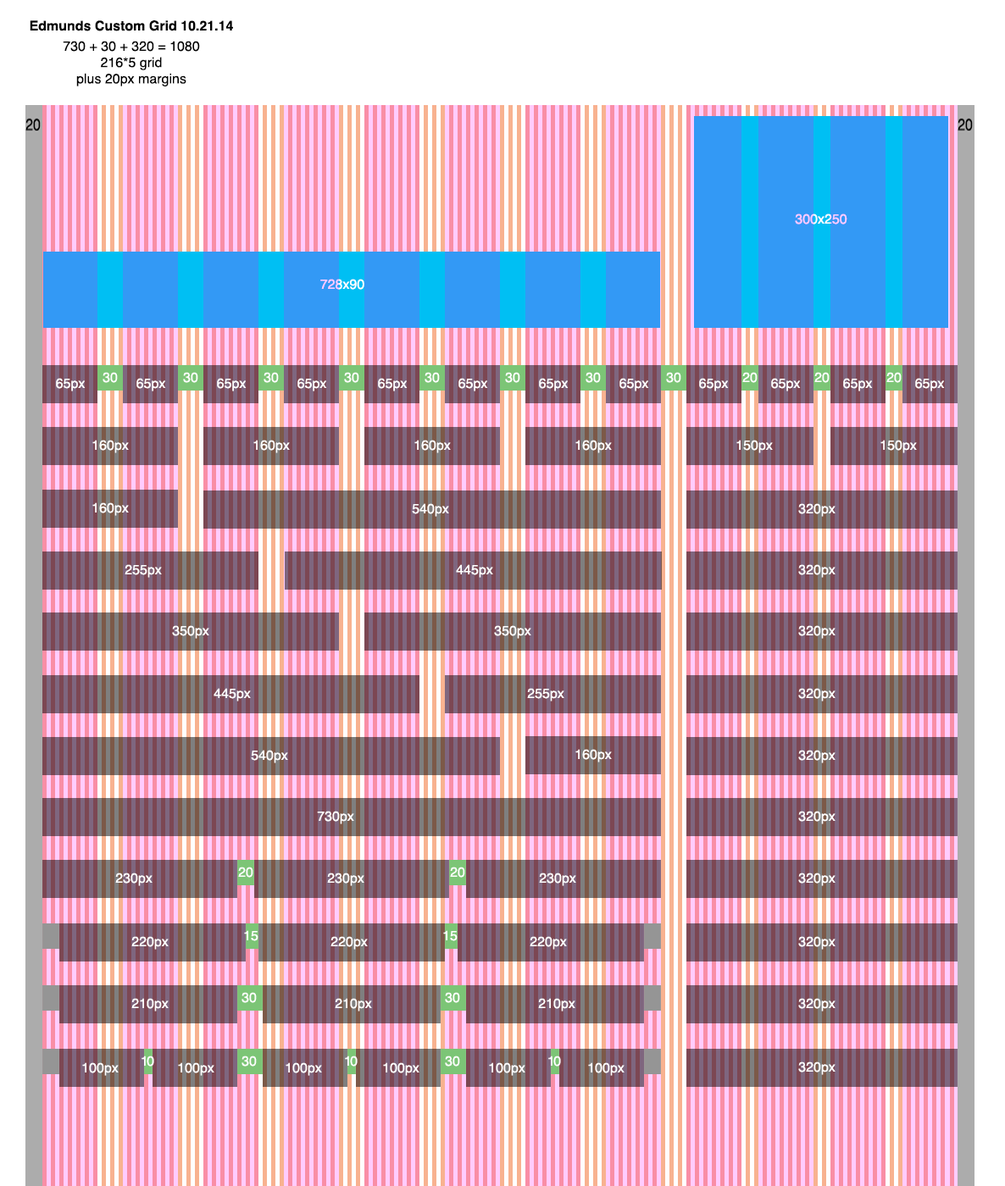
<style>
.page{position:relative;width:1005px;height:1186px}
.page>*{position:absolute;margin:0}
.t1{font:13.6px "Helvetica-Bold";color:#000000}
.t2{font:13.6px/20.3px "Helvetica";color:#000000}
.t3{font:13.6px "Helvetica";color:#000000}
.t4{font:13.6px "Helvetica"}
.t5{font:13.6px "Helvetica";color:#ffffff}
.t6{font:13.6px "Helvetica";letter-spacing:-0.1em;color:#ffffff}
</style>
<div class="page">
<p class="t1" style="left:30px;top:20px;width:203px;height:66px;text-align:center">Edmunds Custom Grid 10.21.14<br><span class="t2">730 + 30 + 320 = 1080<br></span><span class="t3">216*5 grid<br>plus 20px margins</span></p>
<p class="t4" style="left:795px;top:214px;width:52px;height:11px">300x250</p>
<p class="t5" style="left:320px;top:279px;width:44px;height:11px">728x90</p>
<p class="t5" style="left:56px;top:378px;width:30px;height:14px">65px</p>
<p class="t5" style="left:136px;top:378px;width:30px;height:14px">65px</p>
<p class="t5" style="left:217px;top:378px;width:30px;height:14px">65px</p>
<p class="t5" style="left:297px;top:378px;width:30px;height:14px">65px</p>
<p class="t5" style="left:378px;top:378px;width:30px;height:14px">65px</p>
<p class="t5" style="left:458px;top:378px;width:30px;height:14px">65px</p>
<p class="t5" style="left:539px;top:378px;width:30px;height:14px">65px</p>
<p class="t5" style="left:619px;top:378px;width:30px;height:14px">65px</p>
<p class="t5" style="left:699px;top:378px;width:30px;height:14px">65px</p>
<p class="t5" style="left:771px;top:378px;width:30px;height:14px">65px</p>
<p class="t5" style="left:843px;top:378px;width:30px;height:14px">65px</p>
<p class="t5" style="left:915px;top:378px;width:30px;height:14px">65px</p>
<p class="t5" style="left:92px;top:440px;width:37px;height:13px">160px</p>
<p class="t5" style="left:253px;top:440px;width:37px;height:13px">160px</p>
<p class="t5" style="left:414px;top:440px;width:37px;height:13px">160px</p>
<p class="t5" style="left:575px;top:440px;width:37px;height:13px">160px</p>
<p class="t5" style="left:736px;top:440px;width:37px;height:13px">150px</p>
<p class="t5" style="left:880px;top:440px;width:37px;height:13px">150px</p>
<p class="t5" style="left:92px;top:503px;width:37px;height:13px">160px</p>
<p class="t5" style="left:412px;top:503px;width:37px;height:14px">540px</p>
<p class="t5" style="left:798px;top:503px;width:38px;height:14px">320px</p>
<p class="t5" style="left:125px;top:564px;width:37px;height:14px">255px</p>
<p class="t5" style="left:456px;top:564px;width:37px;height:14px">445px</p>
<p class="t5" style="left:798px;top:564px;width:38px;height:14px">320px</p>
<p class="t5" style="left:172px;top:625px;width:37px;height:14px">350px</p>
<p class="t5" style="left:494px;top:625px;width:37px;height:14px">350px</p>
<p class="t5" style="left:798px;top:625px;width:38px;height:14px">320px</p>
<p class="t5" style="left:214px;top:688px;width:37px;height:14px">445px</p>
<p class="t5" style="left:527px;top:688px;width:37px;height:14px">255px</p>
<p class="t5" style="left:798px;top:688px;width:38px;height:14px">320px</p>
<p class="t5" style="left:251px;top:750px;width:37px;height:14px">540px</p>
<p class="t5" style="left:575px;top:749px;width:37px;height:14px">160px</p>
<p class="t5" style="left:798px;top:750px;width:38px;height:14px">320px</p>
<p class="t5" style="left:317px;top:811px;width:37px;height:14px">730px</p>
<p class="t5" style="left:798px;top:811px;width:38px;height:14px">320px</p>
<p class="t5" style="left:238px;top:867px;width:15px;height:11px">20</p>
<p class="t5" style="left:450px;top:867px;width:15px;height:11px">20</p>
<p class="t5" style="left:115px;top:873px;width:38px;height:13px">230px</p>
<p class="t5" style="left:327px;top:873px;width:37px;height:13px">230px</p>
<p class="t5" style="left:539px;top:873px;width:37px;height:13px">230px</p>
<p class="t5" style="left:798px;top:873px;width:38px;height:13px">320px</p>
<p class="t5" style="left:131px;top:936px;width:38px;height:14px">220px</p>
<p class="t5" style="left:244px;top:930px;width:14px;height:12px">15</p>
<p class="t5" style="left:331px;top:936px;width:37px;height:14px">220px</p>
<p class="t5" style="left:443px;top:930px;width:15px;height:12px">15</p>
<p class="t5" style="left:530px;top:936px;width:37px;height:14px">220px</p>
<p class="t5" style="left:798px;top:936px;width:38px;height:14px">320px</p>
<p class="t5" style="left:131px;top:998px;width:38px;height:14px">210px</p>
<p class="t5" style="left:242px;top:992px;width:15px;height:11px">30</p>
<p class="t5" style="left:335px;top:998px;width:37px;height:14px">210px</p>
<p class="t5" style="left:445px;top:992px;width:15px;height:11px">30</p>
<p class="t5" style="left:538px;top:998px;width:37px;height:14px">210px</p>
<p class="t5" style="left:798px;top:998px;width:38px;height:14px">320px</p>
<p class="t6" style="left:142px;top:1056px;width:12px;height:11px">10</p>
<p class="t5" style="left:242px;top:1056px;width:15px;height:11px">30</p>
<p class="t6" style="left:345px;top:1056px;width:13px;height:11px">10</p>
<p class="t5" style="left:445px;top:1056px;width:15px;height:11px">30</p>
<p class="t6" style="left:548px;top:1056px;width:13px;height:11px">10</p>
<p class="t5" style="left:798px;top:1062px;width:38px;height:13px">320px</p>
<p class="t5" style="left:82px;top:1063px;width:37px;height:13px">100px</p>
<p class="t5" style="left:178px;top:1063px;width:36px;height:13px">100px</p>
<p class="t5" style="left:286px;top:1063px;width:36px;height:13px">100px</p>
<p class="t5" style="left:383px;top:1063px;width:36px;height:13px">100px</p>
<p class="t5" style="left:489px;top:1063px;width:36px;height:13px">100px</p>
<p class="t5" style="left:588px;top:1063px;width:37px;height:13px">100px</p>
</div>
